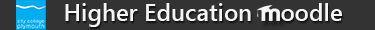
<style>
.page{position:relative;width:375px;height:30px;background:#333333}
.page>*{position:absolute;margin:0}
.t1{font:24px "SegoeUI-Semibold";color:#f5f5f5}
</style>
<div class="page">
<p class="t1" style="left:65px;top:3px;width:277px;height:24px">Higher Education    oodle</p>
</div>
